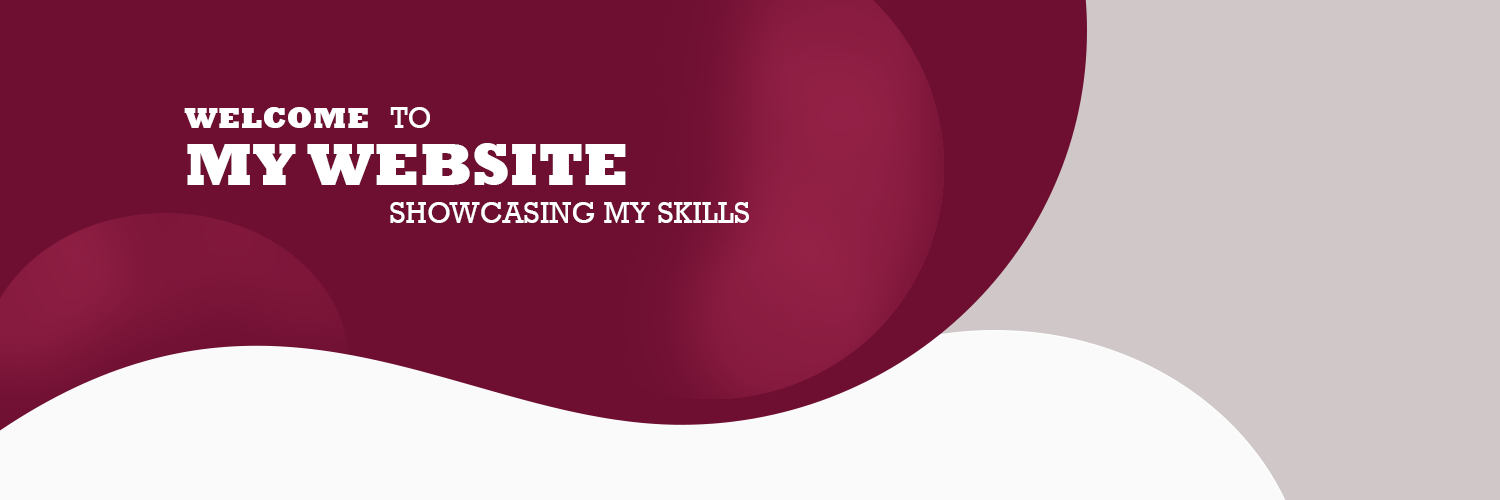
<style>
.page{position:relative;width:1500px;height:500px;background:#6e0f31}
.page>*{position:absolute;margin:0}
.t1{font:30.5px "Rockwell-ExtraBold";color:#ffffff}
.t2{font:30.5px "Rockwell";color:#ffffff}
.t3{font:61px "Rockwell-ExtraBold";color:#ffffff}
</style>
<div class="page">
<p class="t1" style="left:184px;top:107px;width:184px;height:21px">WELCOME</p>
<p class="t2" style="left:390px;top:107px;width:40px;height:21px">TO</p>
<p class="t3" style="left:187px;top:143px;width:439px;height:42px">MY WEBSITE</p>
<p class="t2" style="left:390px;top:202px;width:359px;height:21px">SHOWCASING MY SKILLS</p>
</div>
